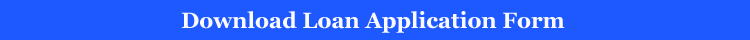
<style>
.page{position:relative;width:750px;height:40px;background:#1e59ff}
.page>*{position:absolute;margin:0}
.t1{font:22px "Georgia-Bold";color:#fbfaff}
</style>
<div class="page">
<p class="t1" style="left:181px;top:11px;width:384px;height:22px">Download Loan Application Form</p>
</div>
